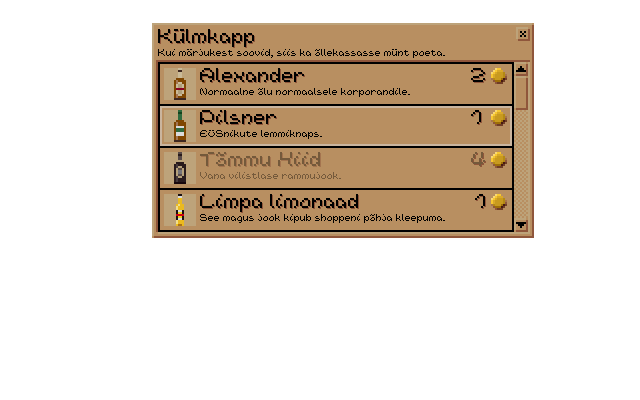
<style>
.page{position:relative;width:640px;height:400px;background:#ffffff}
.page>*{position:absolute;margin:0}
.t1{font:18px "Nineteen-Ninety-Six";color:#000000}
.t2{font:9px "Nineteen-Ninety-Six";color:#000000}
.t3{font:18px "Nineteen-Ninety-Six";color:#74593b}
.t4{font:9px "Nineteen-Ninety-Six";color:#74593b}
</style>
<div class="page">
<p class="t1" style="left:158px;top:29px;width:96px;height:18px">Külmkapp</p>
<p class="t2" style="left:158px;top:49px;width:287px;height:9px">Kui märjukest soovid, siis ka õllekassasse münt poeta.</p>
<p class="t1" style="left:200px;top:68px;width:104px;height:14px">Alexander</p>
<p class="t1" style="left:471px;top:68px;width:14px;height:14px">2</p>
<p class="t2" style="left:200px;top:88px;width:210px;height:9px">Normaalne õlu normaalsele korporandile.</p>
<p class="t1" style="left:200px;top:110px;width:76px;height:14px">Pilsner</p>
<p class="t1" style="left:471px;top:110px;width:10px;height:14px">1</p>
<p class="t2" style="left:200px;top:130px;width:122px;height:9px">EÜSnikute lemmiknaps.</p>
<p class="t3" style="left:200px;top:152px;width:120px;height:14px">Tõmmu Hiid</p>
<p class="t3" style="left:471px;top:152px;width:14px;height:14px">4</p>
<p class="t4" style="left:200px;top:172px;width:141px;height:7px">Vana vilistlase rammujook.</p>
<p class="t1" style="left:200px;top:194px;width:158px;height:18px">Limpa limonaad</p>
<p class="t1" style="left:475px;top:194px;width:10px;height:14px">1</p>
<p class="t2" style="left:200px;top:214px;width:245px;height:9px">See magus jook kipub shoppeni põhja kleepuma.</p>
</div>
